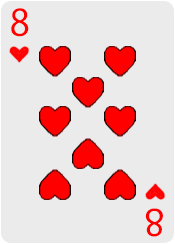
<style>
.page{position:relative;width:175px;height:244px;background:#ebebeb}
.page>*{position:absolute;margin:0}
.t1{font:36px "KozGoPr6N-Regular";color:#ff0000}
</style>
<div class="page">
<p class="t1" style="left:11px;top:8px;width:18px;height:29px">8</p>
<p class="t1" style="left:145px;top:208px;width:18px;height:29px;rotate:-180deg">8</p>
</div>
